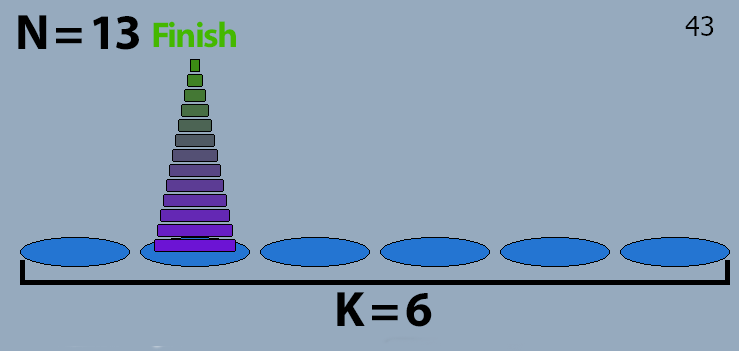
<style>
.page{position:relative;width:739px;height:351px;background:#96aabe}
.page>*{position:absolute;margin:0}
.t1{font:50px "MyriadPro-Bold";letter-spacing:-0.05em;color:#000000}
.t2{font:36px "MyriadPro-Bold";letter-spacing:-0.05em;color:#45b800}
</style>
<div class="page">
<p class="t1" style="left:18px;top:15px;width:121px;height:35px">N = 13</p>
<p class="t2" style="left:153px;top:21px;width:83px;height:27px">Finish</p>
<p class="t1" style="left:337px;top:292px;width:95px;height:35px">K = 6</p>
</div>
